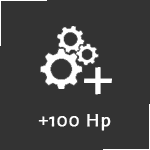
<style>
.page{position:relative;width:150px;height:150px;background:#333333}
.page>*{position:absolute;margin:0}
.t1{font:62.5px "AlegreyaSans-Regular";letter-spacing:0.05em;color:#fefefe;font-weight:bold}
.t2{font:20px "AlegreyaSans-Regular";letter-spacing:0.05em;color:#fefefe;font-weight:bold}
</style>
<div class="page">
<p class="t1" style="left:84px;top:67px;width:28px;height:28px">+</p>
<p class="t2" style="left:38px;top:114px;width:73px;height:17px">+100 Hp</p>
</div>
